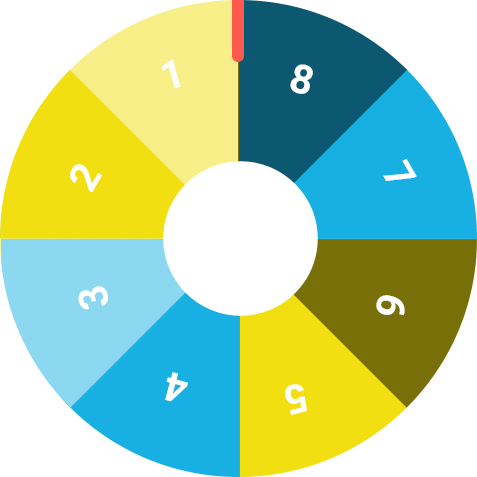
<style>
.page{position:relative;width:477px;height:477px;background:#ffffff}
.page>*{position:absolute;margin:0}
.t1{font:40.3px "Roboto-Bold";letter-spacing:-0.01em;color:#ffffff}
</style>
<div class="page">
<p class="t1" style="left:162px;top:59px;width:19px;height:30px;rotate:-15deg">1</p>
<p class="t1" style="left:290px;top:64px;width:23px;height:30px;rotate:15deg">8</p>
<p class="t1" style="left:383px;top:158px;width:34px;height:23px;rotate:60deg">7</p>
<p class="t1" style="left:70px;top:164px;width:32px;height:29px;rotate:-60deg">2</p>
<p class="t1" style="left:78px;top:286px;width:30px;height:24px;rotate:-105deg">3</p>
<p class="t1" style="left:376px;top:295px;width:29px;height:21px;rotate:105deg">6</p>
<p class="t1" style="left:165px;top:372px;width:23px;height:30px;rotate:-165deg">4</p>
<p class="t1" style="left:285px;top:384px;width:22px;height:31px;rotate:165deg">5</p>
</div>
